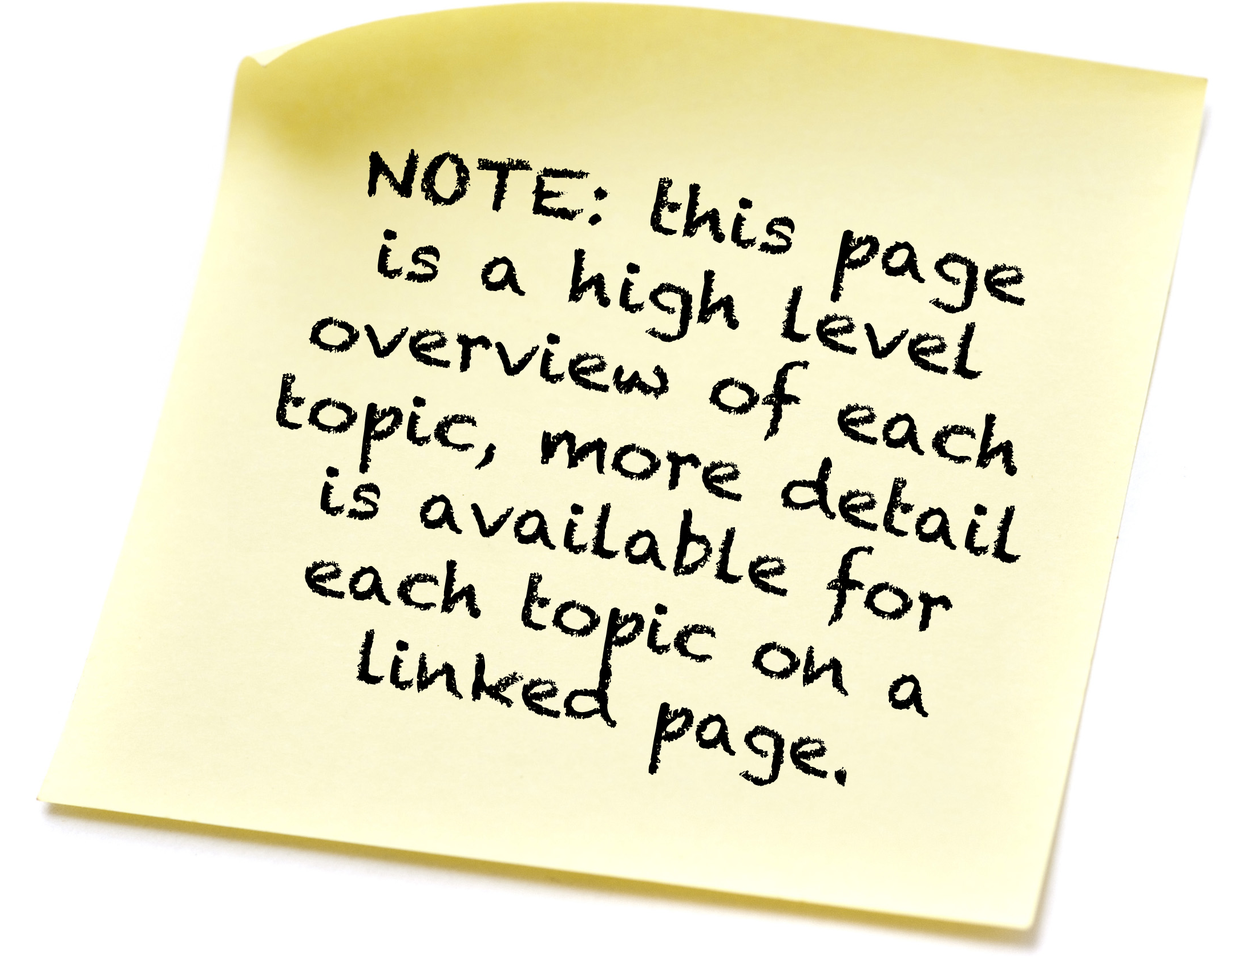
<style>
.page{position:relative;width:1244px;height:958px;background:#ffffff}
.page>*{position:absolute;margin:0}
.t1{font:69px "Chalkduster";color:#000000}
</style>
<div class="page">
<p class="t1" style="left:276px;top:149px;width:750px;height:638px;text-align:center;rotate:11deg">NOTE: this page <br>is a high level <br>overview of each topic, more detail is available for each topic on a <br>linked page.</p>
</div>
